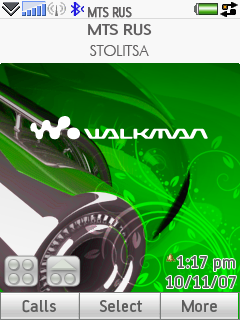
<style>
.page{position:relative;width:240px;height:320px}
.page>*{position:absolute;margin:0}
.t1{font:15px "AFBattersea";color:#626061;font-weight:bold;scale:0.91 1}
.t2{font:17px "AFBattersea-Medium";color:#626061;scale:1.18 1}
.t3{font:17px "FuturaLightLight";color:#626061}
.t4{font:18.2px "AFBattersea-Medium";letter-spacing:0.025em;color:#5d5d5d}
</style>
<div class="page">
<p class="t1" style="left:88px;top:7px;width:44px;height:11px">MTS RUS</p>
<p class="t2" style="left:88px;top:23px;width:64px;height:13px">MTS RUS</p>
<p class="t3" style="left:90px;top:45px;width:59px;height:11px">STOLITSA</p>
<p class="t4" style="left:177px;top:256px;width:58px;height:15px">1:17 pm</p>
<p class="t4" style="left:166px;top:276px;width:70px;height:12px">10/11/07</p>
<p class="t4" style="left:22px;top:300px;width:34px;height:13px">Calls</p>
<p class="t4" style="left:99px;top:300px;width:44px;height:12px">Select</p>
<p class="t4" style="left:182px;top:300px;width:35px;height:12px">More</p>
</div>
